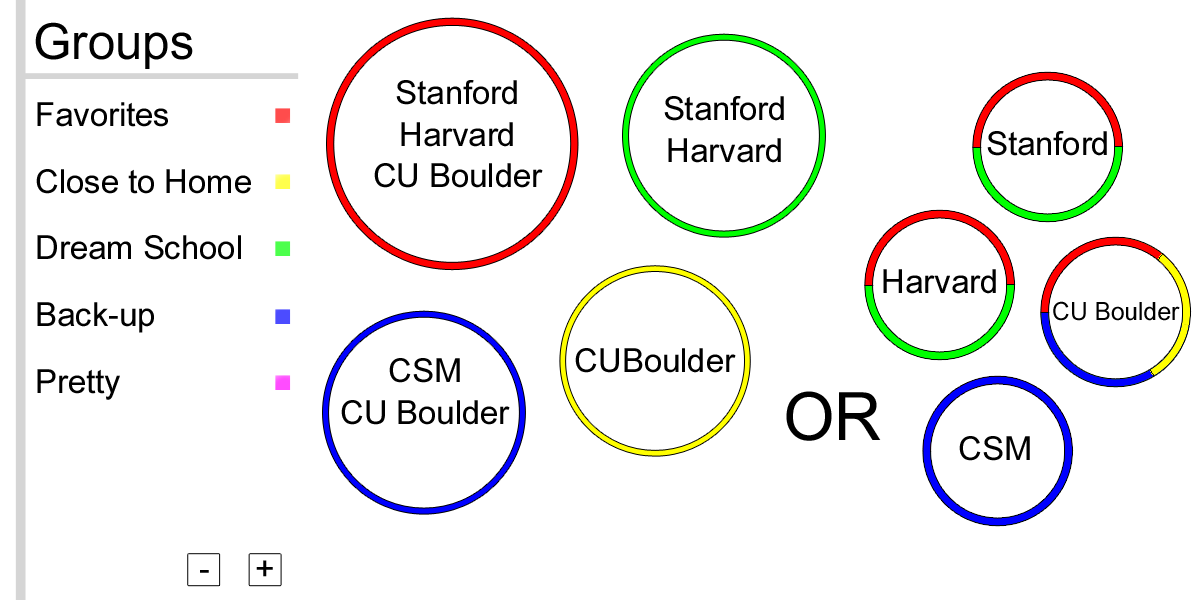
<style>
.page{position:relative;width:1200px;height:600px;background:#ffffff}
.page>*{position:absolute;margin:0}
.t1{font:50px "ArialNarrow";color:#000000;scale:1.2 1}
.t2{font:33.3px/41.7px "ArialNarrow";color:#000000;scale:1.2 1}
.t3{font:33.3px/66.7px "ArialNarrow";color:#000000;scale:1.2 1}
.t4{font:33.3px "ArialNarrow";color:#000000;scale:1.2 1}
.t5{font:25px "ArialNarrow";color:#000000;scale:1.2 1}
.t6{font:66.7px "ArialNarrow";color:#000000;scale:1.2 1}
</style>
<div class="page">
<p class="t1" style="left:35px;top:22px;width:158px;height:47px">Groups</p>
<p class="t2" style="left:374px;top:80px;width:169px;height:108px;text-align:center">Stanford<br>Harvard<br>CU Boulder</p>
<p class="t3" style="left:36px;top:102px;width:215px;height:298px">Favorites<br>Close to Home<br>Dream School<br>Back-up<br>Pretty</p>
<p class="t2" style="left:664px;top:96px;width:120px;height:67px;text-align:center">Stanford<br>Harvard</p>
<p class="t4" style="left:987px;top:131px;width:120px;height:25px">Stanford</p>
<p class="t4" style="left:883px;top:269px;width:113px;height:25px">Harvard</p>
<p class="t5" style="left:1053px;top:301px;width:127px;height:20px">CU Boulder</p>
<p class="t4" style="left:575px;top:348px;width:161px;height:25px">CUBoulder</p>
<p class="t2" style="left:341px;top:358px;width:169px;height:67px;text-align:center">CSM<br>CU Boulder</p>
<p class="t6" style="left:786px;top:391px;width:95px;height:50px">OR</p>
<p class="t4" style="left:959px;top:436px;width:71px;height:25px">CSM</p>
<p class="t4" style="left:200px;top:560px;width:73px;height:17px">-     +</p>
</div>
